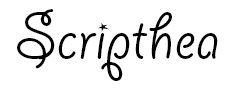
<style>
.page{position:relative;width:235px;height:89px;background:#ffffff}
.page>*{position:absolute;margin:0}
.t1{font:72px "GiddyupStd";color:#000000}
</style>
<div class="page">
<p class="t1" style="left:17px;top:9px;width:201px;height:72px">Scripthea</p>
</div>
